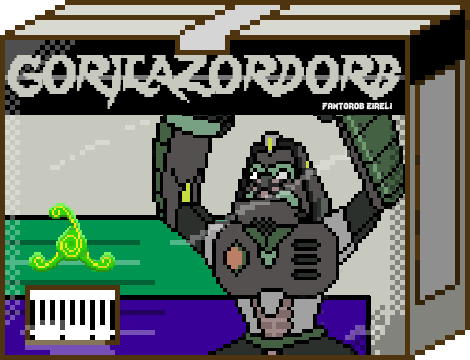
<style>
.page{position:relative;width:470px;height:360px;background:#c7c9be}
.page>*{position:absolute;margin:0}
.t1{font:48px "Lady-Radical";color:#c7c9be;scale:0.72 1}
.t2{font:12px "Lady-Radical";color:#fbfbfb}
</style>
<div class="page">
<p class="t1" style="left:8px;top:55px;width:393px;height:54px">GORILAZORDORB</p>
<p class="t2" style="left:322px;top:102px;width:70px;height:8px">fantorob eireli</p>
</div>
